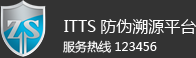
<style>
.page{position:relative;width:196px;height:58px;background:#333333}
.page>*{position:absolute;margin:0}
.t1{font:16px "MicrosoftYaHei";color:#ffffff}
.t2{font:12px "MicrosoftYaHei";color:#ffffff}
</style>
<div class="page">
<p class="t1" style="left:64px;top:19px;width:132px;height:15px">ITTS防伪溯源平台</p>
<p class="t2" style="left:63px;top:40px;width:94px;height:13px">服务热线 123456</p>
</div>
